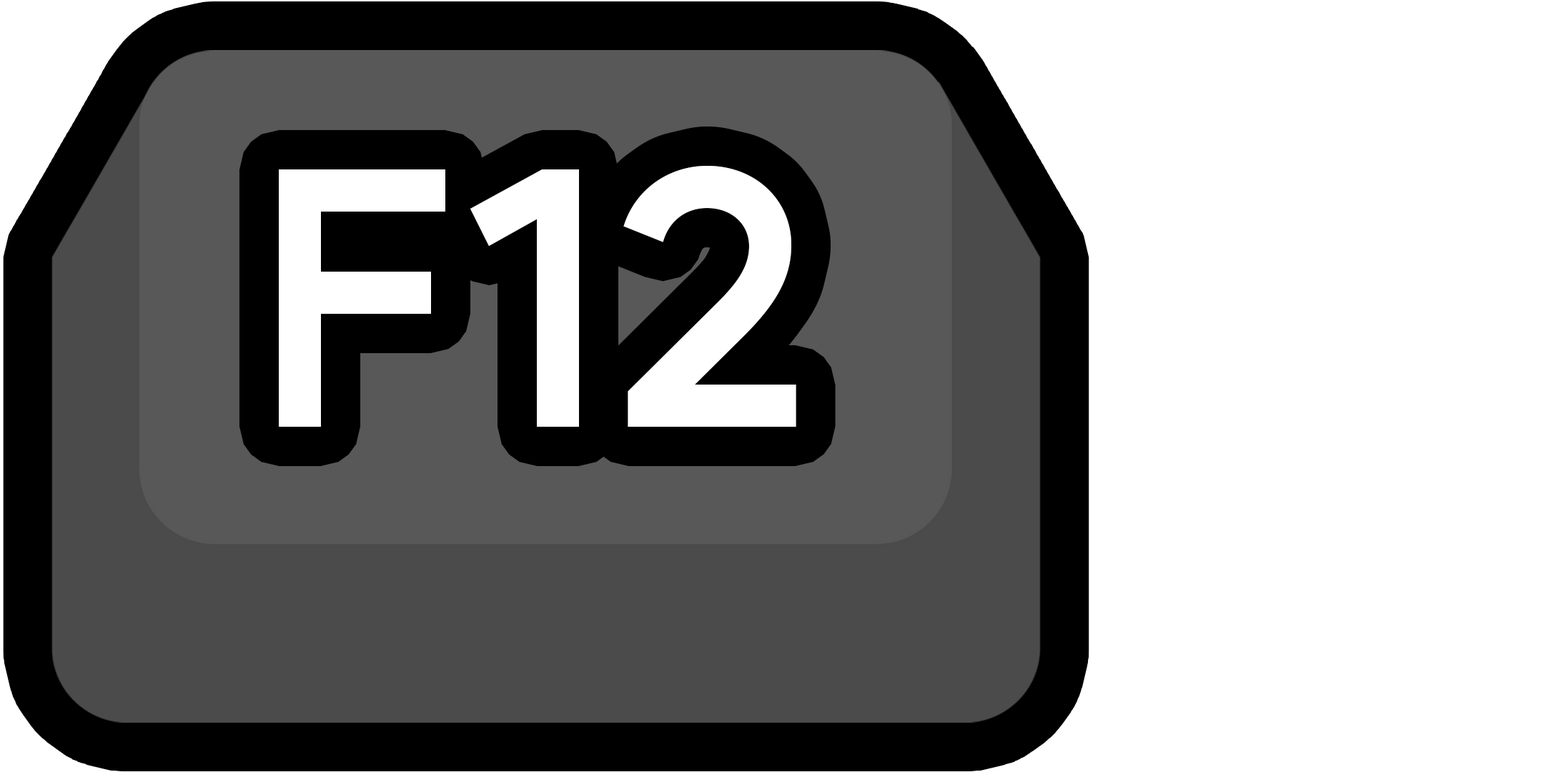
<style>
.page{position:relative;width:1544px;height:772px;background:#ffffff}
.page>*{position:absolute;margin:0}
.t1{font:357.5px "MusticaPro-SemiBold";letter-spacing:0.02em;color:#ffffff}
</style>
<div class="page">
<p class="t1" style="left:279px;top:166px;width:517px;height:261px">F12</p>
</div>
